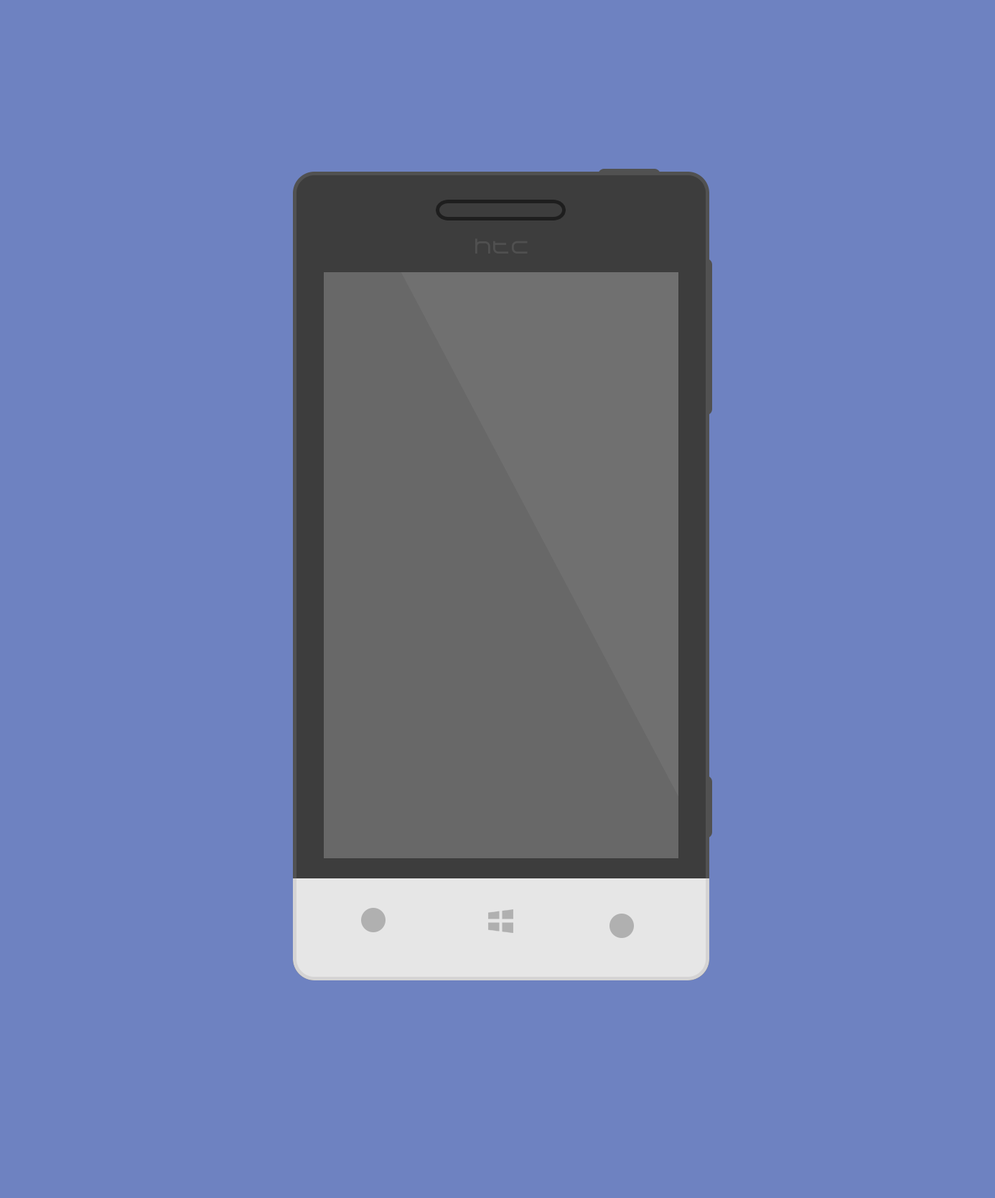
<style>
.page{position:relative;width:995px;height:1198px;background:#6e82c1}
.page>*{position:absolute;margin:0}
.t1{font:18px "Arkitech-Medium";color:#505050}
</style>
<div class="page">
<p class="t1" style="left:475px;top:238px;width:53px;height:16px">htc</p>
</div>
